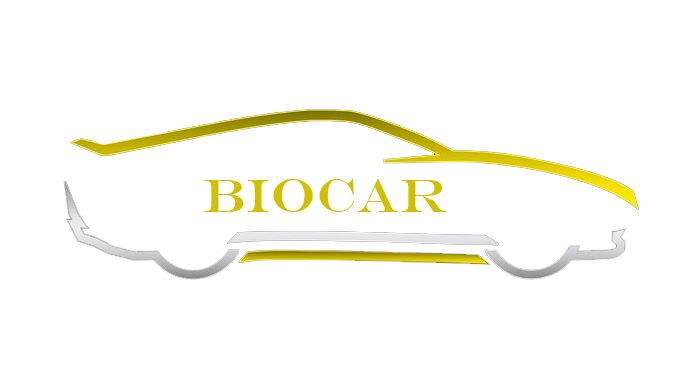
<style>
.page{position:relative;width:700px;height:373px;background:#ffffff}
.page>*{position:absolute;margin:0}
.t1{font:48px "EngraversMT";color:#d1bf02}
</style>
<div class="page">
<p class="t1" style="left:204px;top:179px;width:243px;height:33px">Biocar</p>
</div>
